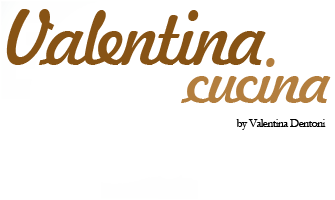
<style>
.page{position:relative;width:335px;height:200px;background:#ffffff}
.page>*{position:absolute;margin:0}
.t1{font:72px "Freehand521BT-RegularC";letter-spacing:-0.05em;color:#875315}
.t2{font:60px "Freehand521BT-RegularC";letter-spacing:-0.05em;color:#b37e3e}
.t3{font:12px "Garamond";letter-spacing:-0.05em;color:#000000}
</style>
<div class="page">
<p class="t1" style="left:6px;top:9px;width:260px;height:56px">Valentina</p>
<p class="t2" style="left:181px;top:58px;width:150px;height:45px">cucina</p>
<p class="t3" style="left:236px;top:119px;width:90px;height:11px">by Valentina Dentoni</p>
</div>
